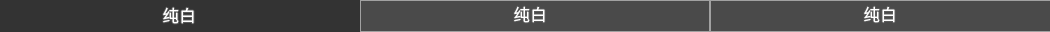
<style>
.page{position:relative;width:1050px;height:32px;background:#4a4a4a}
.page>*{position:absolute;margin:0}
.t1{font:16.7px "SourceHanSansSC-Normal";color:#ffffff}
</style>
<div class="page">
<p class="t1" style="left:514px;top:6px;width:31px;height:17px">纯白</p>
<p class="t1" style="left:864px;top:6px;width:31px;height:17px">纯白</p>
<p class="t1" style="left:163px;top:7px;width:31px;height:17px">纯白</p>
</div>
